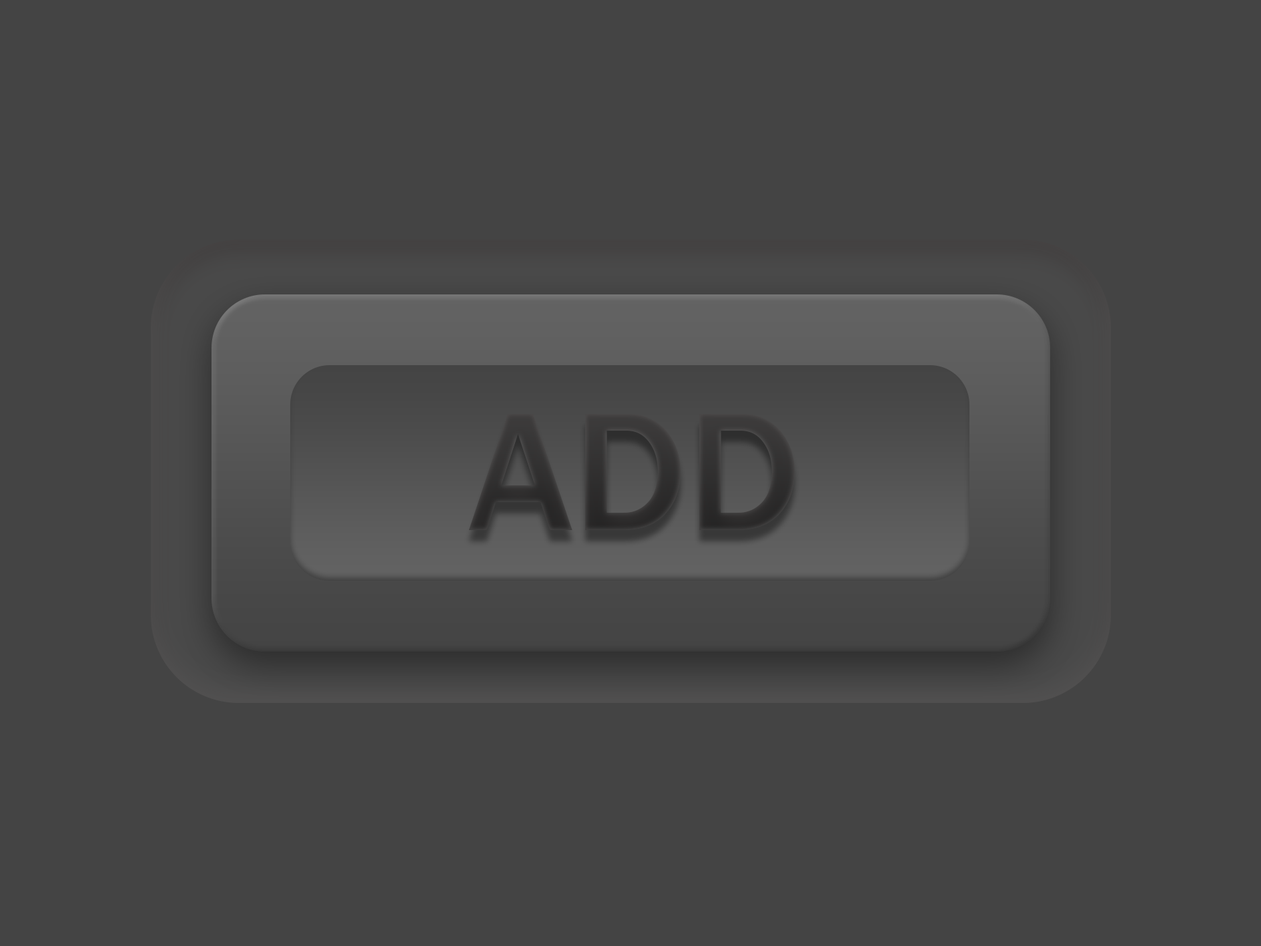
<style>
.page{position:relative;width:1261px;height:946px;background:#444444}
.page>*{position:absolute;margin:0}
.t1{font:174.3px "FranklinGothic-Medium";color:#353434}
</style>
<div class="page">
<p class="t1" style="left:468px;top:414px;width:327px;height:116px">ADD</p>
</div>
